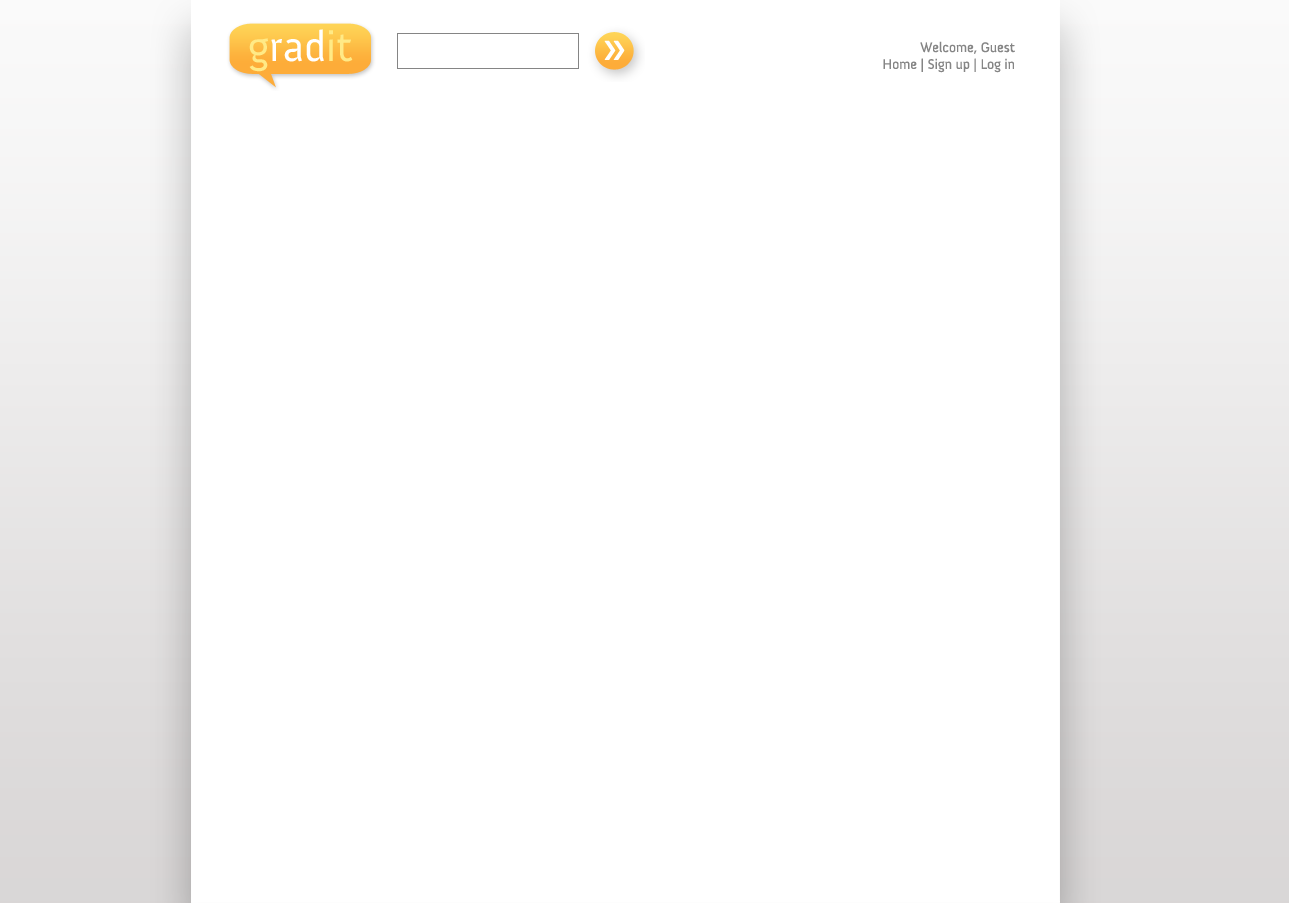
<style>
.page{position:relative;width:1289px;height:903px;background:#ffffff}
.page>*{position:absolute;margin:0}
.t1{font:14px "Anivers-Regular";color:#858585}
</style>
<div class="page">
<p class="t1" style="left:883px;top:41px;width:132px;height:32px;text-align:right">Welcome, Guest<br>Home | Sign up | Log in</p>
</div>
